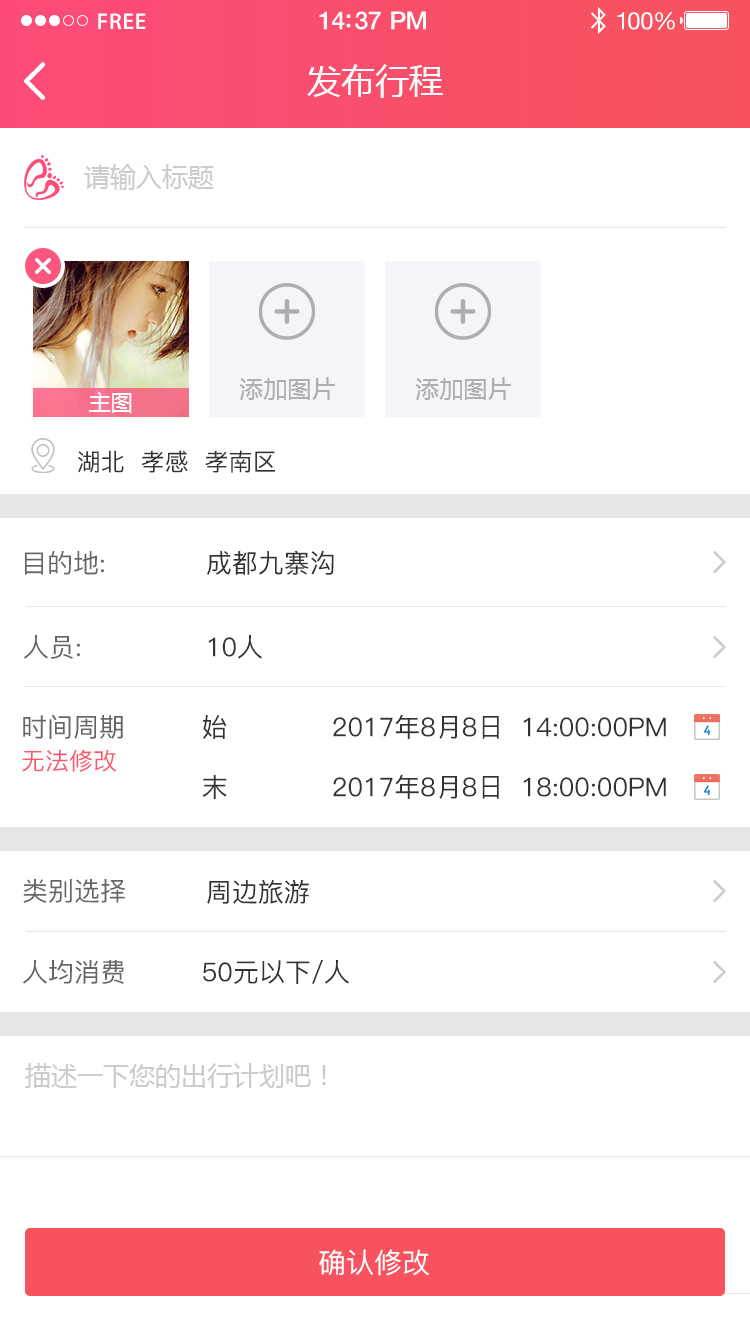
<style>
.page{position:relative;width:750px;height:1336px;background:#ffffff}
.page>*{position:absolute;margin:0}
.t1{font:23px "MyriadPro-Semibold";letter-spacing:0.02em;color:#ffffff}
.t2{font:25px "HelveticaNeue-Medium";letter-spacing:-0.02em;color:#ffffff}
.t3{font:24px "HelveticaNeue";letter-spacing:-0.02em;color:#ffffff}
.t4{font:34px "MicrosoftYaHei";color:#ffffff;text-transform:uppercase}
.t5{font:26px "MicrosoftYaHei";color:#cccccc;text-transform:uppercase}
.t6{font:24px "MicrosoftYaHei";color:#adaeaf;text-transform:uppercase}
.t7{font:22px "MicrosoftYaHei";color:#ffffff;text-transform:uppercase}
.t8{font:24px "PingFang-SC-Medium";color:#333333;text-transform:uppercase}
.t9{font:26px "PingFang-SC-Medium";color:#666666;text-transform:uppercase}
.t10{font:26px "PingFang-SC-Medium";color:#333333;text-transform:uppercase}
.t11{font:26px/33px "PingFang-SC-Medium";color:#666666;text-transform:uppercase}
.t12{font:24px/33px "PingFang-SC-Medium";color:#fa5970;text-transform:uppercase}
.t13{font:28px "PingFang-SC-Medium";color:#ffffff;text-transform:uppercase}
</style>
<div class="page">
<p class="t1" style="left:98px;top:13px;width:48px;height:16px">FREE</p>
<p class="t2" style="left:319px;top:11px;width:107px;height:19px">14:37 PM</p>
<p class="t3" style="left:617px;top:12px;width:58px;height:18px">100%</p>
<p class="t4" style="left:307px;top:64px;width:136px;height:34px">发布行程</p>
<p class="t5" style="left:84px;top:164px;width:130px;height:26px">请输入标题</p>
<p class="t6" style="left:239px;top:377px;width:96px;height:23px">添加图片</p>
<p class="t6" style="left:415px;top:377px;width:96px;height:23px">添加图片</p>
<p class="t7" style="left:89px;top:392px;width:43px;height:21px">主图</p>
<p class="t8" style="left:77px;top:450px;width:198px;height:23px">湖北  孝感  孝南区</p>
<p class="t9" style="left:25px;top:551px;width:79px;height:24px">目的地:</p>
<p class="t10" style="left:207px;top:550px;width:127px;height:25px">成都九寨沟</p>
<p class="t9" style="left:24px;top:635px;width:56px;height:24px">人员:</p>
<p class="t10" style="left:208px;top:635px;width:54px;height:24px">10人</p>
<p class="t11" style="left:22px;top:714px;width:101px;height:58px">时间周期<br><span class="t12">无法修改</span></p>
<p class="t10" style="left:203px;top:715px;width:24px;height:24px">始</p>
<p class="t10" style="left:333px;top:714px;width:333px;height:25px">2017年8月8日  14:00:00PM</p>
<p class="t10" style="left:333px;top:774px;width:333px;height:25px">2017年8月8日  18:00:00PM</p>
<p class="t10" style="left:202px;top:775px;width:25px;height:24px">末</p>
<p class="t9" style="left:23px;top:879px;width:102px;height:24px">类别选择</p>
<p class="t10" style="left:207px;top:879px;width:102px;height:25px">周边旅游</p>
<p class="t9" style="left:23px;top:960px;width:101px;height:24px">人均消费</p>
<p class="t10" style="left:203px;top:960px;width:146px;height:24px">50元以下/人</p>
<p class="t5" style="left:25px;top:1063px;width:301px;height:25px">描述一下您的出行计划吧！</p>
<p class="t13" style="left:319px;top:1249px;width:110px;height:27px">确认修改</p>
</div>
